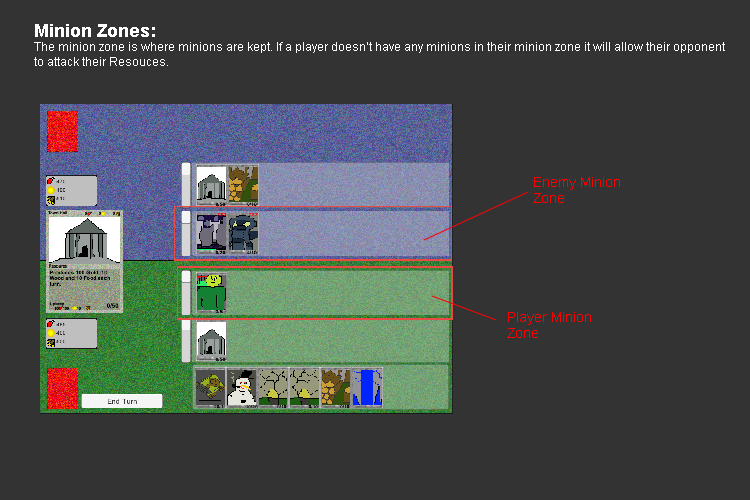
<style>
.page{position:relative;width:750px;height:500px;background:#333333}
.page>*{position:absolute;margin:0}
.t1{font:12px "ArialMT";color:#ffffff}
.t2{font:18px "Arial-BoldMT";color:#ffffff}
.t3{font:14px "ArialMT";color:#ff0000}
</style>
<div class="page">
<p class="t1" style="left:34px;top:24px;width:691px;height:42px"><span class="t2">Minion Zones:<br></span>The minion zone is where minions are kept. If a player doesn’t have any minions in their minion zone it will allow their opponent<br>to attack their Resouces.</p>
<p class="t3" style="left:533px;top:177px;width:87px;height:26px">Enemy Minion<br>Zone</p>
<p class="t3" style="left:507px;top:312px;width:84px;height:26px">Player Minion<br>Zone</p>
</div>
